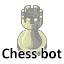
<style>
.page{position:relative;width:64px;height:64px;background:#ffffff}
.page>*{position:absolute;margin:0}
.t1{font:15px "Calibri-Bold";color:#000000}
</style>
<div class="page">
<p class="t1" style="left:2px;top:48px;width:60px;height:11px">Chess bot</p>
</div>
